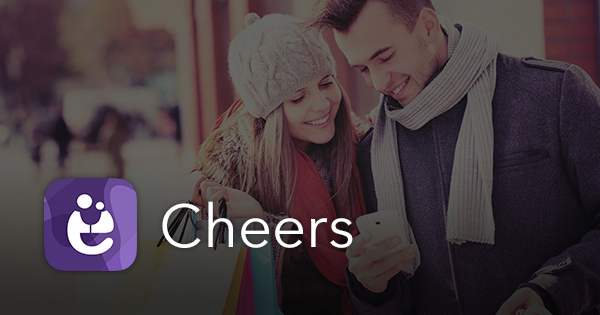
<style>
.page{position:relative;width:600px;height:315px}
.page>*{position:absolute;margin:0}
.t1{font:60px "AvenirNext-Regular";color:#ffffff}
</style>
<div class="page">
<p class="t1" style="left:162px;top:201px;width:191px;height:47px">Cheers</p>
</div>
